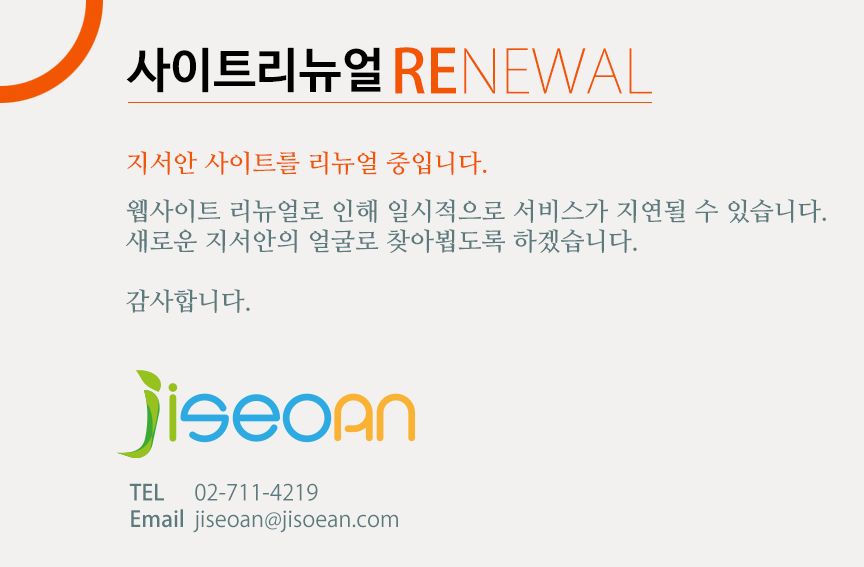
<style>
.page{position:relative;width:864px;height:567px;background:#f2f1f0}
.page>*{position:absolute;margin:0}
.t1{font:48px "NanumBarunGothicOTFBold";color:#000000}
.t2{font:60px "KozGoPr6N-ExtraLight";color:#f25602}
.t3{font:60px "KozGoPr6N-Medium";color:#f25602}
.t4{font:25.1px "NanumMyeongjoOTFBold";color:#f25602}
.t5{font:25.1px/30px "NanumMyeongjoOTFBold";color:#5c7a7c}
.t6{font:22px "KozGoPr6N-Regular";color:#5c7a7c}
.t7{font:22px "KozGoPr6N-Medium";color:#5c7a7c}
</style>
<div class="page">
<p class="t1" style="left:126px;top:47px;width:255px;height:46px">사이트리뉴얼</p>
<p class="t2" style="left:395px;top:47px;width:257px;height:47px"><span class="t3">RE</span>NEWAL</p>
<p class="t4" style="left:127px;top:151px;width:360px;height:24px">지서안 사이트를 리뉴얼 중입니다.</p>
<p class="t5" style="left:126px;top:199px;width:700px;height:114px">웹사이트 리뉴얼로 인해 일시적으로 서비스가 지연될 수 있습니다.<br>새로운 지서안의 얼굴로 찾아뵙도록 하겠습니다.<br><br>감사합니다.</p>
<p class="t6" style="left:129px;top:483px;width:269px;height:50px"><span class="t7">TEL      </span>02-711-4219<br><span class="t7">Email  </span>jiseoan@jisoean.com</p>
</div>
